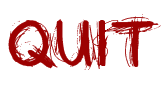
<style>
.page{position:relative;width:166px;height:90px;background:#ffffff}
.page>*{position:absolute;margin:0}
.t1{font:42.3px "AllOverAgain";color:#9c0101}
</style>
<div class="page">
<p class="t1" style="left:8px;top:14px;width:153px;height:56px">quit</p>
</div>
